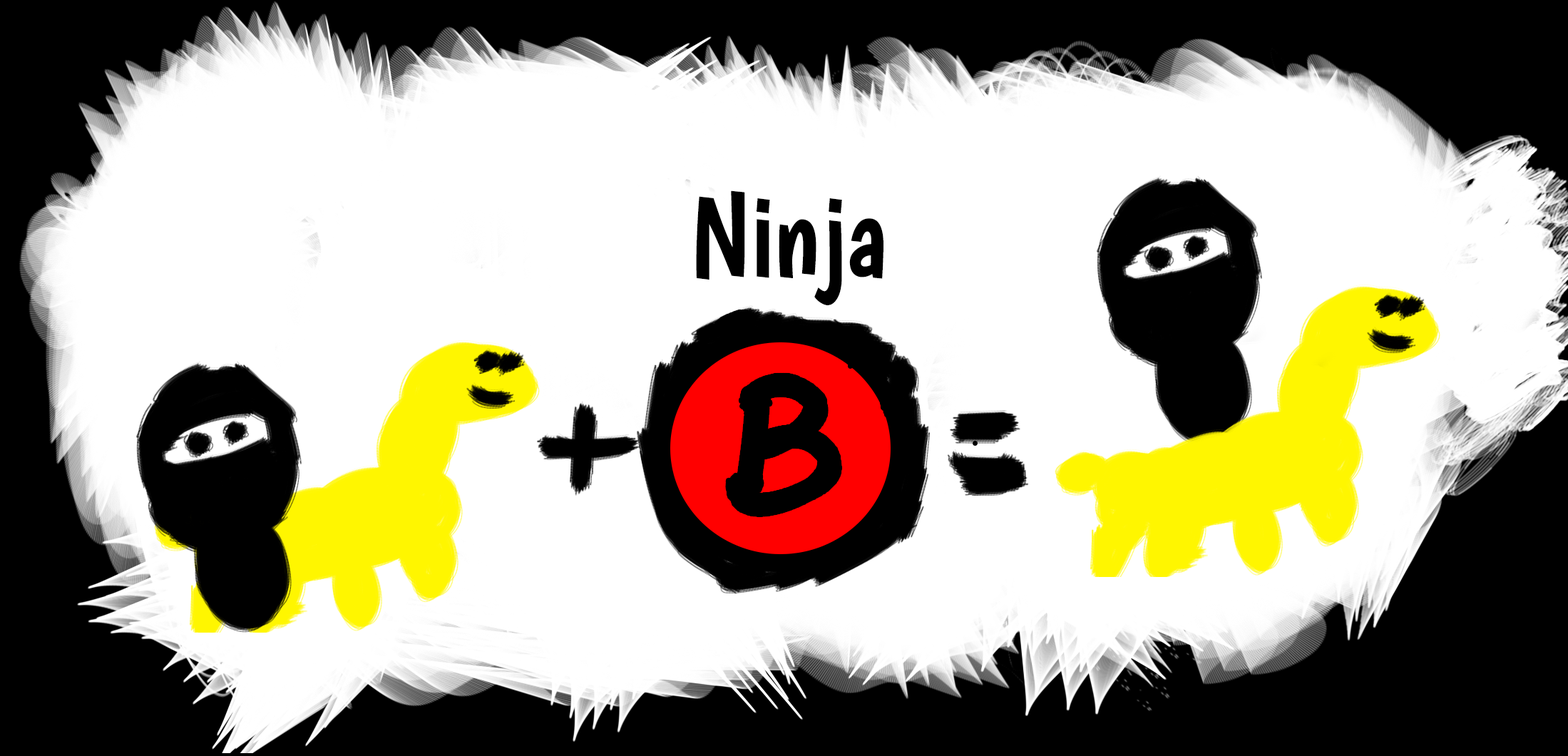
<style>
.page{position:relative;width:1568px;height:756px;background:#ffffff}
.page>*{position:absolute;margin:0}
.t1{font:118.8px "Boogaloo-Regular";color:#000000;scale:0.9 1}
</style>
<div class="page">
<p class="t1" style="left:696px;top:190px;width:187px;height:115px">Ninja</p>
</div>
